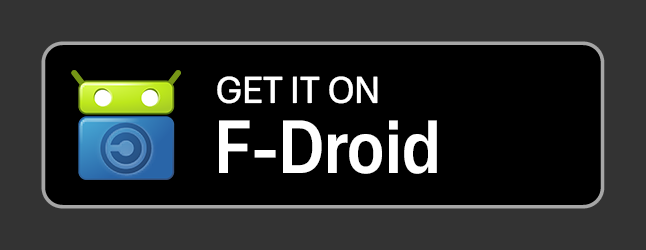
<style>
.page{position:relative;width:646px;height:250px;background:#000000}
.page>*{position:absolute;margin:0}
.t1{font:36px "MonaSans_95.000wdth_500.000wght";color:#ffffff}
.t2{font:72px "MonaSans_90.000wdth_600.000wght";color:#ffffff}
</style>
<div class="page">
<p class="t1" style="left:217px;top:76px;width:161px;height:28px">GET IT ON</p>
<p class="t2" style="left:219px;top:120px;width:218px;height:54px">F-Droid</p>
</div>
